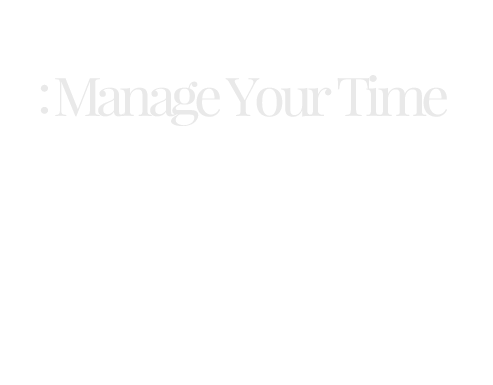
<style>
.page{position:relative;width:493px;height:385px;background:#ffffff}
.page>*{position:absolute;margin:0}
.t1{font:53.5px "PlayfairDisplay-Regular";letter-spacing:-0.095em;color:#e9e9e9;scale:1.05 1}
.t2{font:53.4px "PlayfairDisplay-Regular";letter-spacing:-0.095em;color:#e9e9e9;scale:1.05 1}
</style>
<div class="page">
<p class="t1" style="left:55px;top:75px;width:392px;height:51px">Manage Your Time</p>
<p class="t2" style="left:40px;top:84px;width:8px;height:30px">:</p>
</div>
